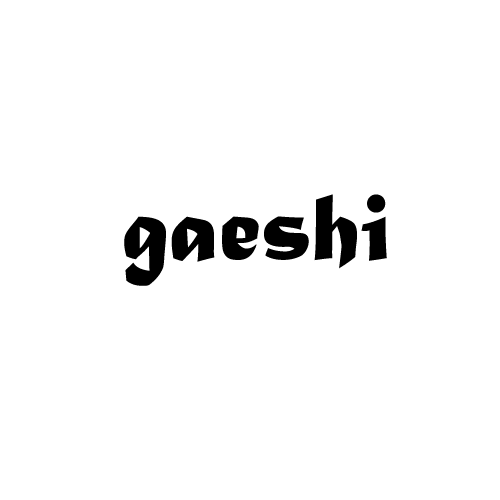
<style>
.page{position:relative;width:500px;height:500px;background:#ffffff}
.page>*{position:absolute;margin:0}
.t1{font:100px "MaturaMTScriptCapitals";letter-spacing:0.005em;color:#000000}
</style>
<div class="page">
<p class="t1" style="left:124px;top:194px;width:263px;height:92px">gaeshi</p>
</div>
